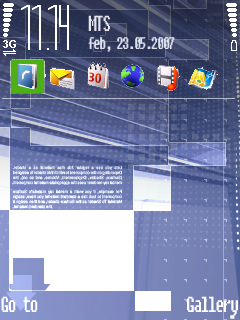
<style>
.page{position:relative;width:240px;height:320px}
.page>*{position:absolute;margin:0}
.t1{font:21.6px "Fixedsys";letter-spacing:-0.1em;color:#f9f8ff;scale:0.65 1}
.t2{font:11px "Arial-BoldMT";color:#ffffff}
.t3{font:16.8px "Fixedsys";letter-spacing:-0.1em;color:#f1f4ff;scale:0.65 1}
.t4{font:21.6px "Fixedsys";letter-spacing:-0.1em;color:#ffffff;scale:0.65 1}
</style>
<div class="page">
<p class="t1" style="left:88px;top:15px;width:22px;height:16px;opacity:0.9">MTS</p>
<p class="t2" style="left:3px;top:40px;width:13px;height:8px">3G</p>
<p class="t3" style="left:88px;top:37px;width:87px;height:15px;opacity:0.9">feb, 23.05.2007</p>
<p class="t4" style="left:1px;top:296px;width:37px;height:16px">Go to</p>
<p class="t4" style="left:187px;top:296px;width:51px;height:23px">Gallery</p>
</div>
